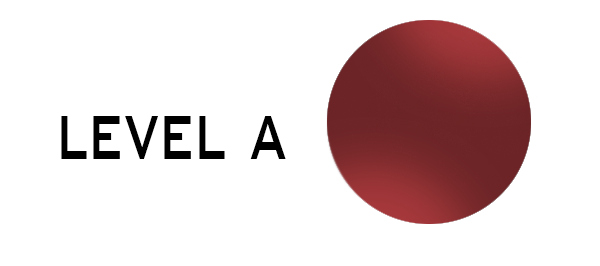
<style>
.page{position:relative;width:600px;height:266px;background:#ffffff}
.page>*{position:absolute;margin:0}
.t1{font:101px "BankGothicBT-Medium";color:#000000;scale:0.57 1}
</style>
<div class="page">
<p class="t1" style="left:61px;top:116px;width:225px;height:43px">level a</p>
</div>
